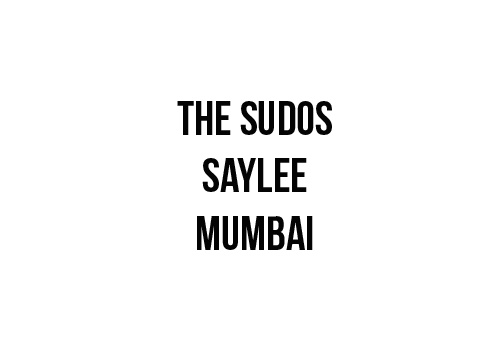
<style>
.page{position:relative;width:504px;height:360px;background:#ffffff}
.page>*{position:absolute;margin:0}
.t1{font:48px "BebasNeueBold";color:#040404}
</style>
<div class="page">
<p class="t1" style="left:177px;top:101px;width:155px;height:149px;text-align:center">the sudos<br>saylee<br>mumbai</p>
</div>
